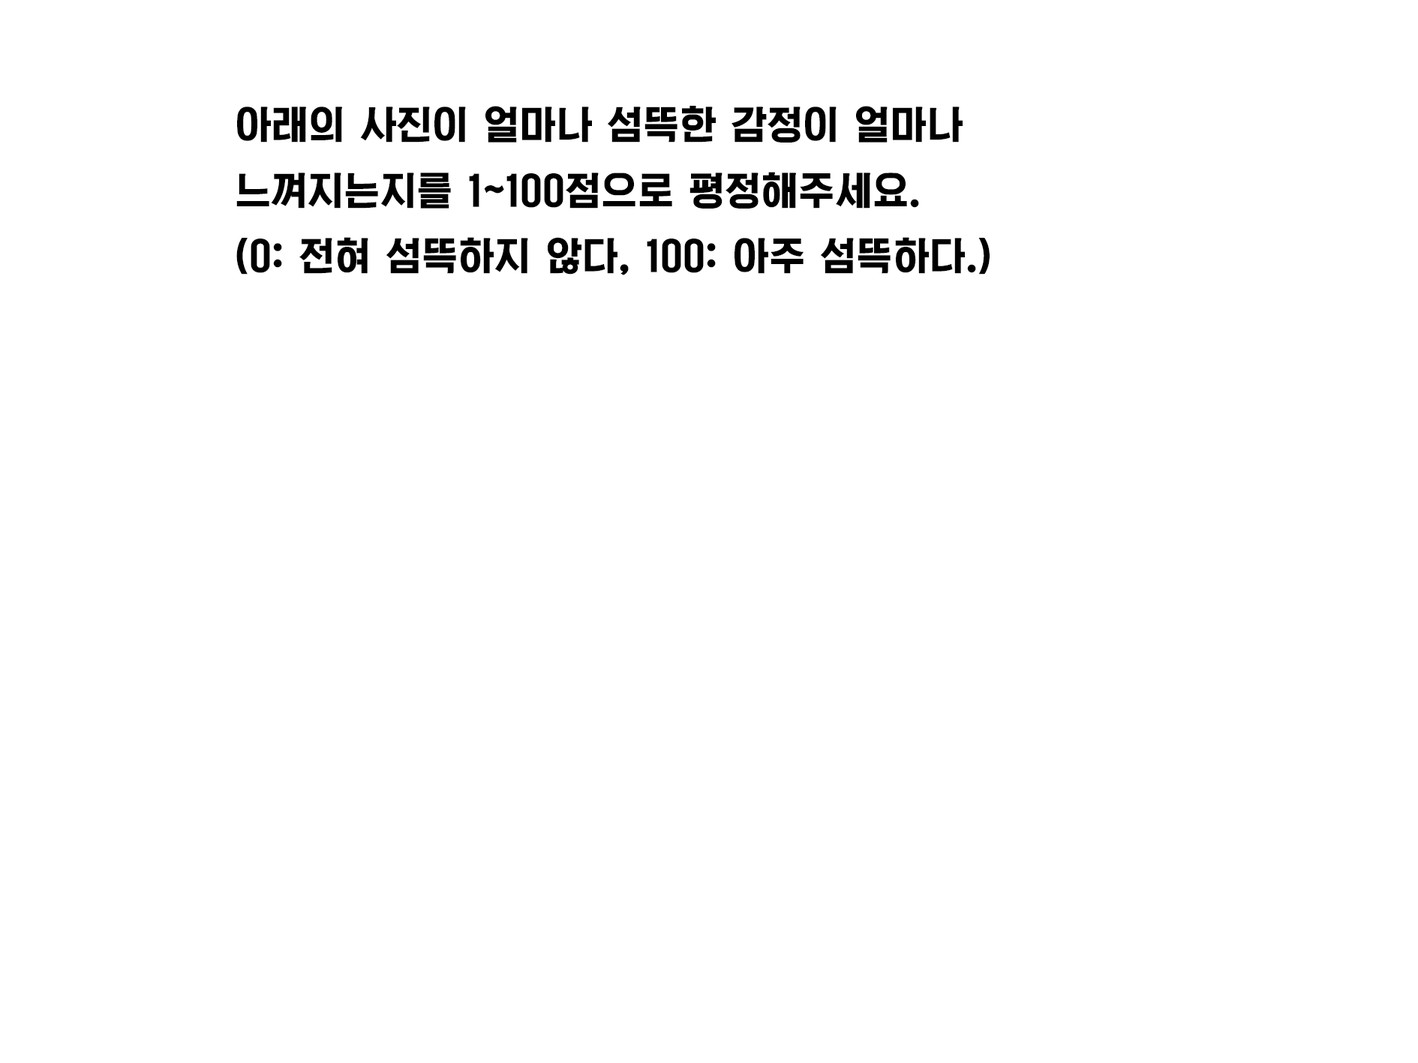
<style>
.page{position:relative;width:1418px;height:1063px;background:#ffffff}
.page>*{position:absolute;margin:0}
.t1{font:9px "KoreanGESP-M";color:#000000}
</style>
<div class="page">
<p class="t1" style="left:236px;top:106px;width:753px;height:169px">아래의 사진이 얼마나 섬뜩한 감정이 얼마나 느껴지는지를 1~100점으로 평정해주세요.<br>(0: 전혀 섬뜩하지 않다, 100: 아주 섬뜩하다.)</p>
</div>
